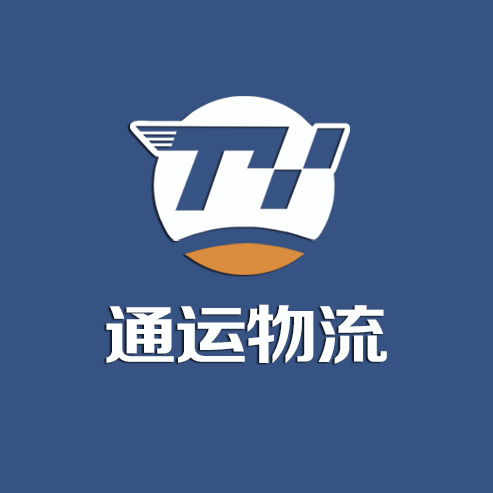
<style>
.page{position:relative;width:493px;height:493px;background:#375383}
.page>*{position:absolute;margin:0}
.t1{font:64.9px "FZZCHJW--GB1-0";letter-spacing:-0.05em;color:#fcfefd;scale:1.15 1}
</style>
<div class="page">
<p class="t1" style="left:106px;top:304px;width:281px;height:60px">通运物流</p>
</div>
